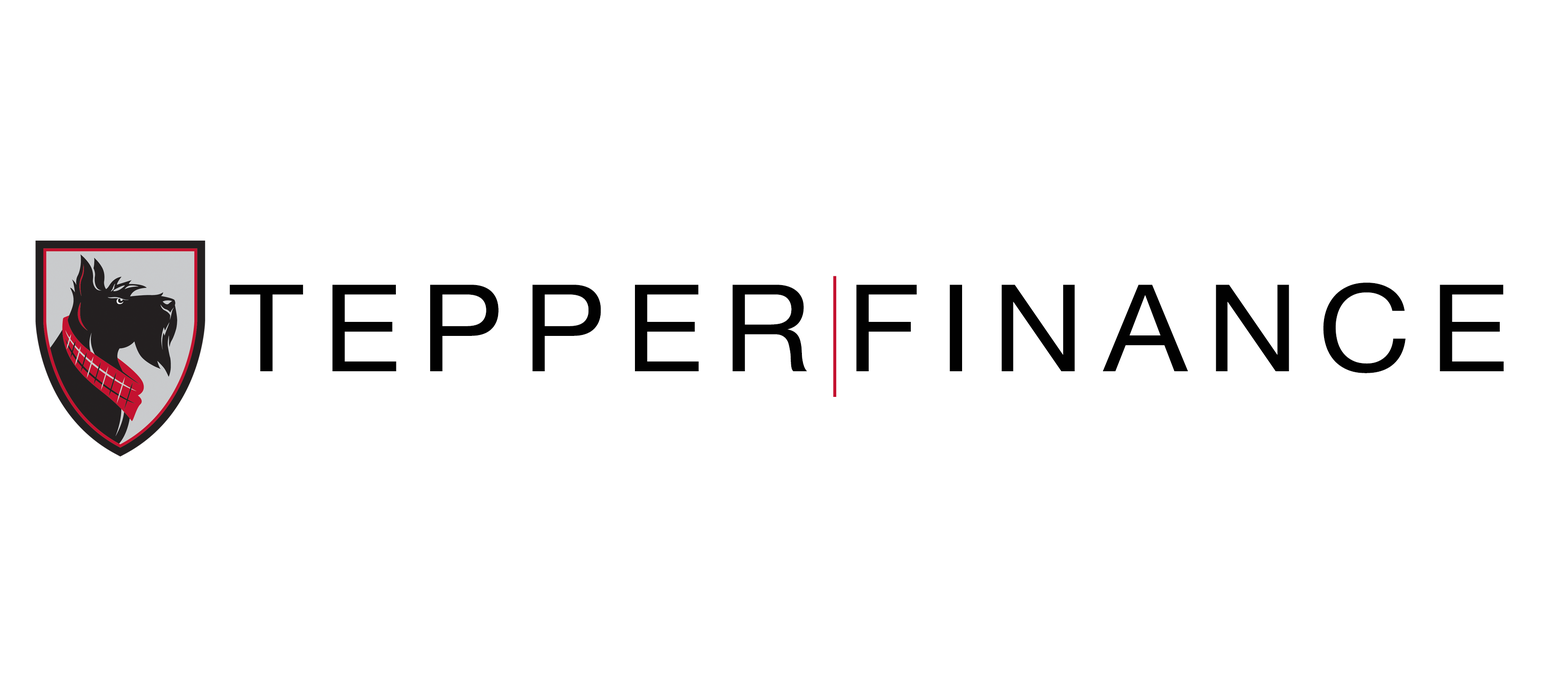
<style>
.page{position:relative;width:1568px;height:697px;background:#ffffff}
.page>*{position:absolute;margin:0}
.t1{font:121px "HelveticaNeue";letter-spacing:0.15em;color:#010101;scale:1.06 1}
.t2{font:121px "HelveticaNeue";letter-spacing:0.15em;color:#c41230;scale:0.37 1}
</style>
<div class="page">
<p class="t1" style="left:229px;top:276px;width:1275px;height:121px">TEPPER<span class="t2">|</span>FINANCE</p>
</div>
